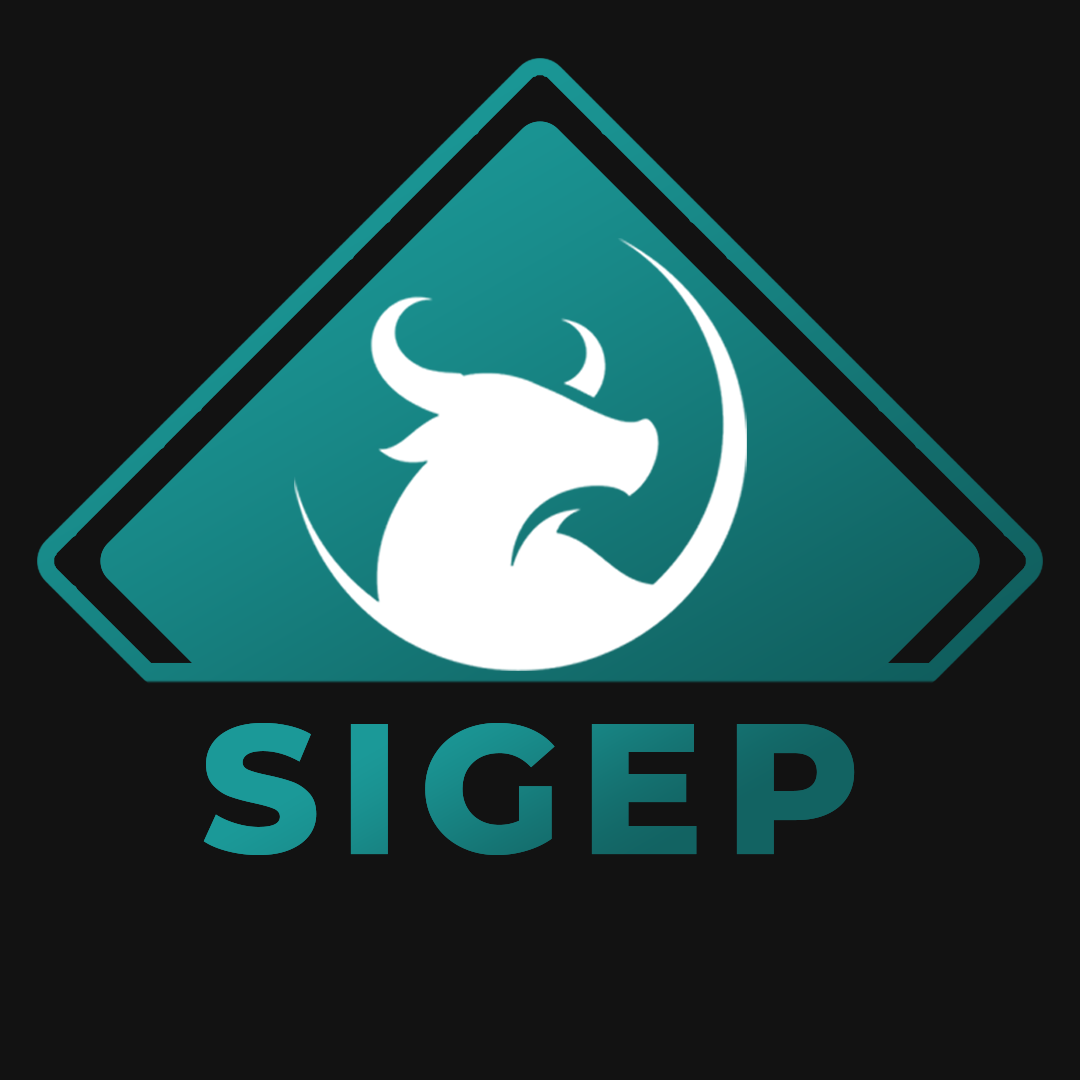
<style>
.page{position:relative;width:1080px;height:1080px;background:#121212}
.page>*{position:absolute;margin:0}
.t1{font:185.6px "Montserrat-ExtraBold";letter-spacing:0.1em;text-transform:uppercase}
</style>
<div class="page">
<p class="t1" style="left:203px;top:723px;width:652px;height:132px">sigep</p>
</div>
